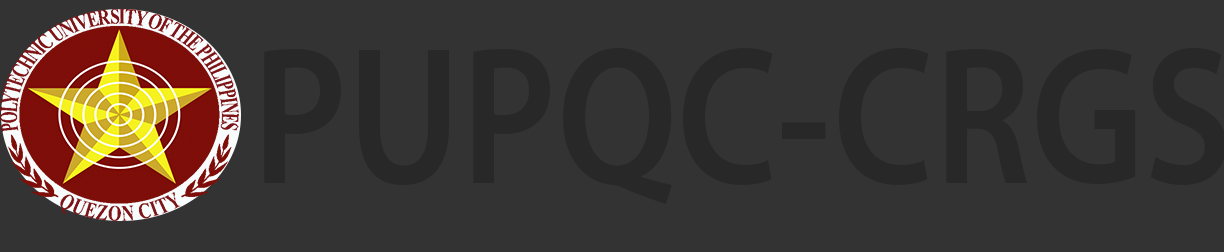
<style>
.page{position:relative;width:1224px;height:252px;background:#333333}
.page>*{position:absolute;margin:0}
.t1{font:196.9px "MyriadPro-Semibold";color:#282828;scale:0.87 1}
</style>
<div class="page">
<p class="t1" style="left:264px;top:47px;width:962px;height:158px">PUPQC-CRGS</p>
</div>
